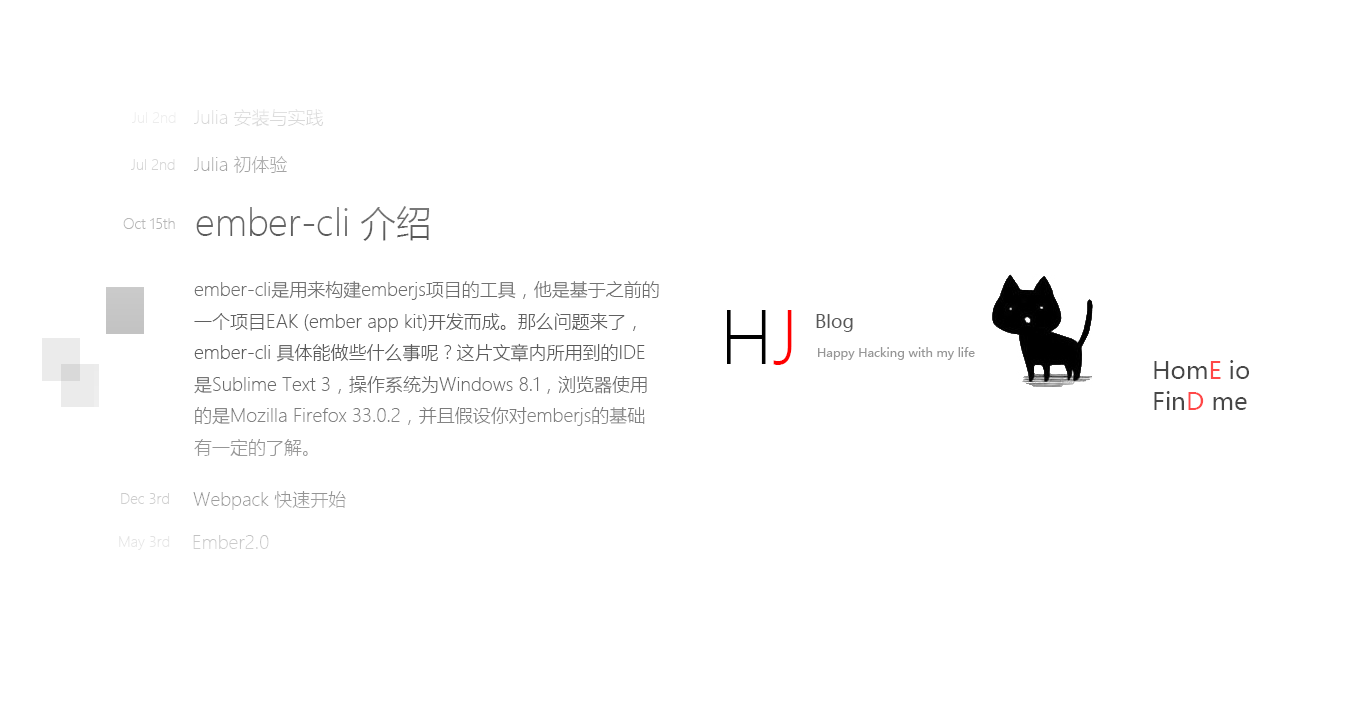
<style>
.page{position:relative;width:1360px;height:709px;background:#ffffff}
.page>*{position:absolute;margin:0}
.t1{font:14px "MicrosoftYaHeiLight";color:#ececec}
.t2{font:18px "MicrosoftYaHeiLight";color:#dcdcdc}
.t3{font:14px "MicrosoftYaHeiLight";color:#d4d4d4}
.t4{font:18px "MicrosoftYaHeiLight";color:#acacac}
.t5{font:36px "MicrosoftYaHeiLight";color:#656565}
.t6{font:14px "MicrosoftYaHeiLight";color:#b7b7b7}
.t7{font:18px "MicrosoftYaHeiLight";color:#6b6b6b}
.t8{font:72px "MicrosoftYaHeiLight";color:#000000}
.t9{font:72px "MicrosoftYaHeiLight";color:#ff0000}
.t10{font:18px "MicrosoftYaHei";color:#585858}
.t11{font:12px "MicrosoftYaHei";color:#969696}
.t12{font:24px "MicrosoftYaHei";color:#474747}
.t13{font:14px "MicrosoftYaHeiLight";color:#cecece}
.t14{font:18px "MicrosoftYaHeiLight";color:#9b9b9b}
.t15{font:14px "MicrosoftYaHeiLight";color:#e4e4e4}
.t16{font:18px "MicrosoftYaHeiLight";color:#cacaca}
</style>
<div class="page">
<p class="t1" style="left:132px;top:112px;width:44px;height:11px">Jul 2nd</p>
<p class="t2" style="left:194px;top:109px;width:130px;height:18px">Julia 安装与实践</p>
<p class="t3" style="left:131px;top:159px;width:44px;height:11px">Jul 2nd</p>
<p class="t4" style="left:194px;top:156px;width:93px;height:17px">Julia 初体验</p>
<p class="t5" style="left:196px;top:206px;width:234px;height:35px">ember-cli 介绍</p>
<p class="t6" style="left:123px;top:218px;width:52px;height:11px">Oct 15th</p>
<p class="t7" style="left:194px;top:281px;width:465px;height:175px">ember-cli是用来构建emberjs项目的工具，他是基于之前的<br>一个项目EAK (ember app kit)开发而成。那么问题来了，<br>ember-cli 具体能做些什么事呢？这片文章内所用到的IDE<br>是Sublime Text 3，操作系统为Windows 8.1，浏览器使用<br>的是Mozilla Firefox 33.0.2，并且假设你对emberjs的基础<br>有一定的了解。</p>
<p class="t8" style="left:727px;top:310px;width:65px;height:55px">H<span class="t9">J</span></p>
<p class="t10" style="left:816px;top:314px;width:37px;height:18px">Blog</p>
<p class="t11" style="left:818px;top:347px;width:157px;height:13px">Happy Hacking with my life</p>
<p class="t12" style="left:1154px;top:360px;width:95px;height:19px">HomE io</p>
<p class="t12" style="left:1154px;top:391px;width:93px;height:19px">FinD me</p>
<p class="t13" style="left:121px;top:493px;width:48px;height:11px">Dec 3rd</p>
<p class="t14" style="left:193px;top:491px;width:153px;height:19px">Webpack 快速开始</p>
<p class="t15" style="left:119px;top:536px;width:51px;height:14px">May 3rd</p>
<p class="t16" style="left:193px;top:535px;width:76px;height:14px">Ember2.0</p>
</div>
